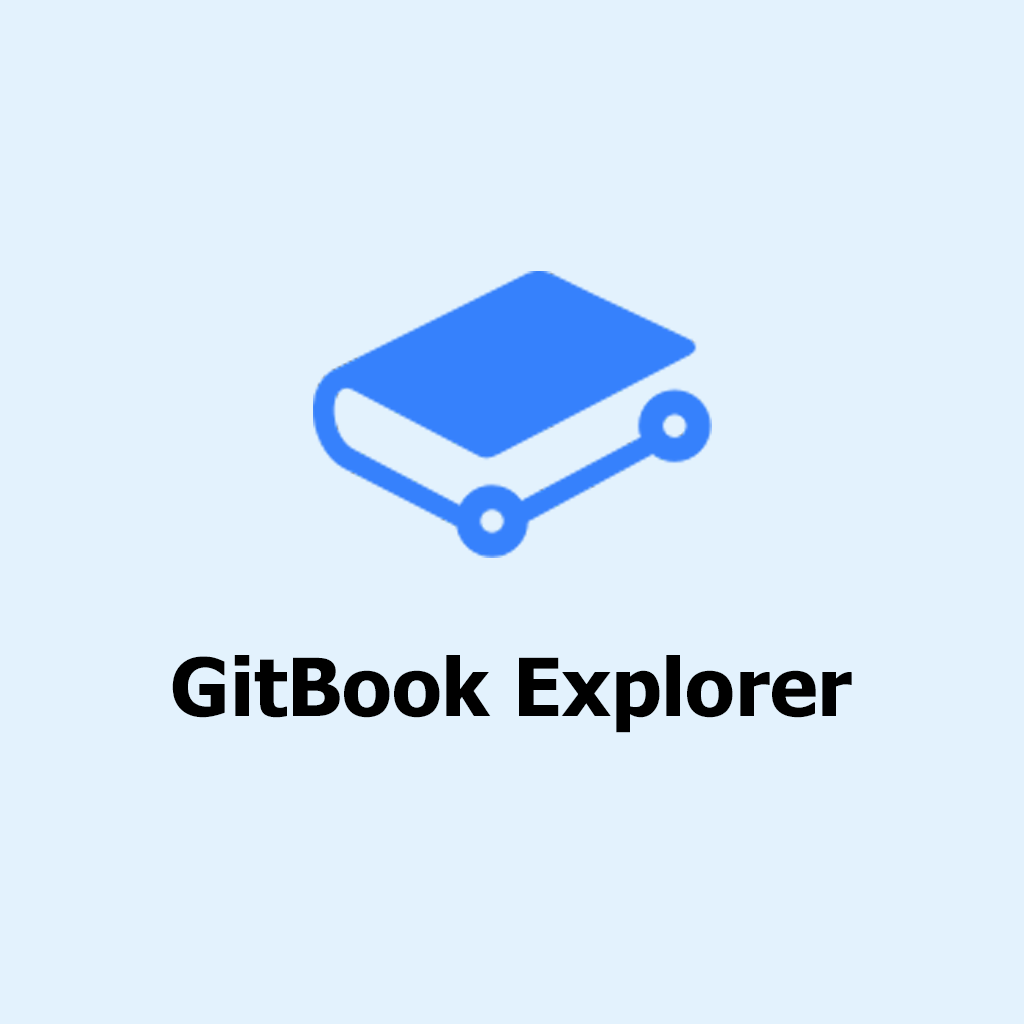
<style>
.page{position:relative;width:1024px;height:1024px;background:#e3f2fd}
.page>*{position:absolute;margin:0}
.t1{font:80.1px "Tahoma-Bold";color:#000000}
</style>
<div class="page">
<p class="t1" style="left:172px;top:655px;width:680px;height:78px">GitBook Explorer</p>
</div>
